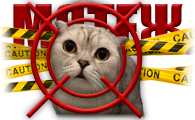
<style>
.page{position:relative;width:195px;height:120px}
.page>*{position:absolute;margin:0}
.t1{font:60px "Impact"}
</style>
<div class="page">
<p class="t1" style="left:13px;top:4px;width:170px;height:47px">МЯТЕЖ</p>
</div>
